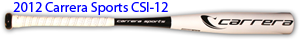
<style>
.page{position:relative;width:300px;height:40px;background:#ffffff}
.page>*{position:absolute;margin:0}
.t1{font:14px "MyriadPro-Regular";color:#0000ff}
</style>
<div class="page">
<p class="t1" style="left:13px;top:2px;width:155px;height:13px">2012 Carrera Sports CSI-12</p>
</div>
